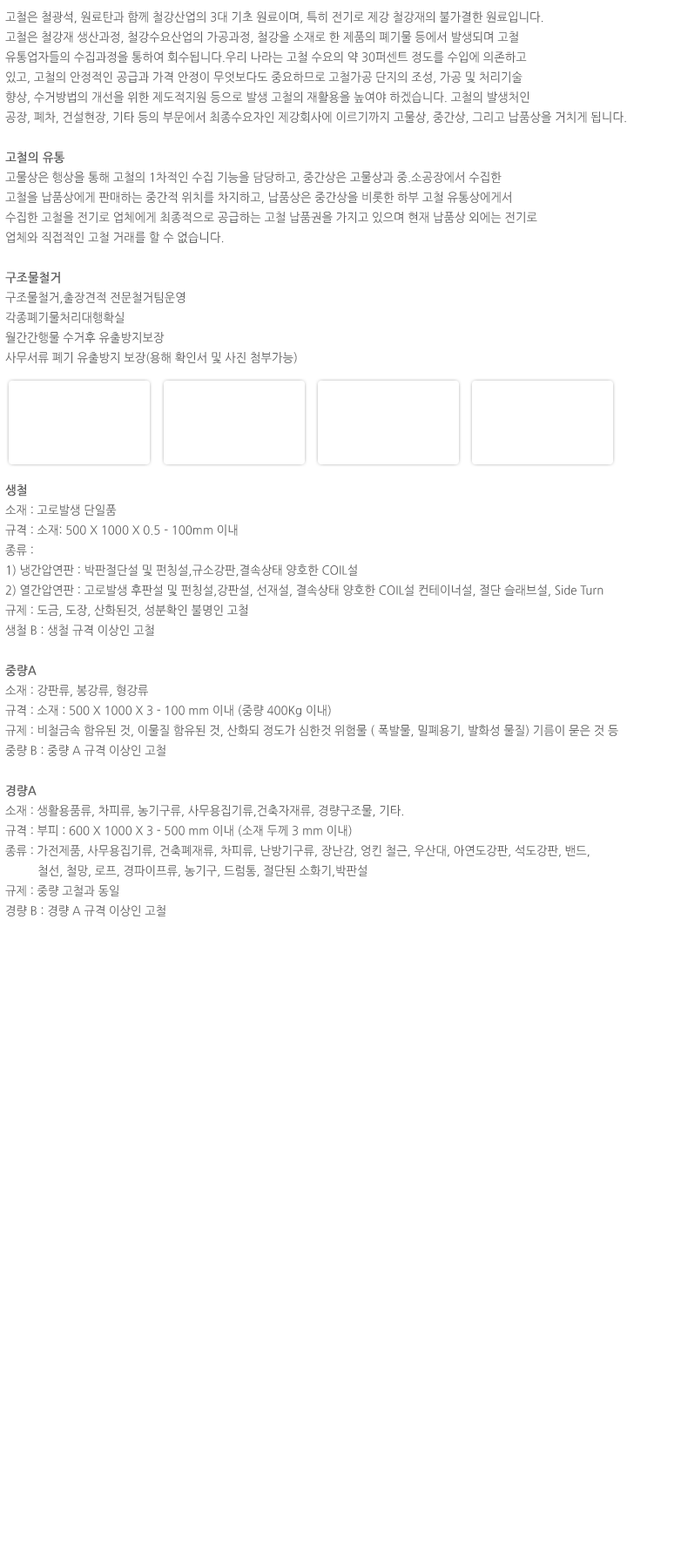
<style>
.page{position:relative;width:681px;height:1568px;background:#ffffff}
.page>*{position:absolute;margin:0}
.t1{font:12.2px/20px "NanumGothic";color:#5e5e5e;scale:0.95 1}
.t2{font:12.2px/20px "NanumGothic";color:#5e5e5e;font-weight:bold;scale:0.95 1}
</style>
<div class="page">
<p class="t1" style="left:5px;top:11px;width:621px;height:353px">고철은 철광석, 원료탄과 함께 철강산업의 3대 기초 원료이며, 특히 전기로 제강 철강재의 불가결한 원료입니다.<br>고철은 철강재 생산과정, 철강수요산업의 가공과정, 철강을 소재로 한 제품의 폐기물 등에서 발생되며 고철 <br>유통업자들의 수집과정을 통하여 회수됩니다.우리 나라는 고철 수요의 약 30퍼센트 정도를 수입에 의존하고 <br>있고, 고철의 안정적인 공급과 가격 안정이 무엇보다도 중요하므로 고철가공 단지의 조성, 가공 및 처리기술 <br>향상, 수거방법의 개선을 위한 제도적지원 등으로 발생 고철의 재활용을 높여야 하겠습니다. 고철의 발생처인 <br>공장, 폐차, 건설현장, 기타 등의 부문에서 최종수요자인 제강회사에 이르기까지 고물상, 중간상, 그리고 납품상을 거치게 됩니다.<br><br><span class="t2">고철의 유통<br></span>고물상은 행상을 통해 고철의 1차적인 수집 기능을 담당하고, 중간상은 고물상과 중.소공장에서 수집한 <br>고철을 납품상에게 판매하는 중간적 위치를 차지하고, 납품상은 중간상을 비롯한 하부 고철 유통상에게서 <br>수집한 고철을 전기로 업체에게 최종적으로 공급하는 고철 납품권을 가지고 있으며 현재 납품상 외에는 전기로<br>업체와 직접적인 고철 거래를 할 수 없습니다.<br><br><span class="t2">구조물철거<br></span>구조물철거,출장견적 전문철거팀운영 <br>각종폐기물처리대행확실 <br>월간간행물 수거후 유출방지보장<br>사무서류 폐기 유출방지 보장(용해 확인서 및 사진 첨부가능)</p>
<p class="t1" style="left:5px;top:484px;width:613px;height:432px"><span class="t2">생철</span> <br>소재 : 고로발생 단일품 <br>규격 : 소재: 500 X 1000 X 0.5 - 100mm 이내 <br>종류 : <br>1) 냉간압연판 : 박판절단설 및 펀칭설,규소강판,결속상태 양호한 COIL설 <br>2) 열간압연판 : 고로발생 후판설 및 펀칭설,강판설, 선재설, 결속상태 양호한 COIL설 컨테이너설, 절단 슬래브설, Side Turn<br>규제 : 도금, 도장, 산화된것, 성분확인 불명인 고철 <br>생철 B : 생철 규격 이상인 고철  <br> <br><span class="t2">중량A <br></span>소재 : 강판류, 봉강류, 형강류 <br>규격 : 소재 : 500 X 1000 X 3 - 100 mm 이내 (중량 400Kg 이내) <br>규제 : 비철금속 함유된 것, 이물질 함유된 것, 산화되 정도가 심한것 위험물 ( 폭발물, 밀폐용기, 발화성 물질) 기름이 묻은 것 등 <br>중량 B : 중량 A 규격 이상인 고철  <br> <br><span class="t2">경량A <br></span>소재 : 생활용품류, 차피류, 농기구류, 사무용집기류,건축자재류, 경량구조물, 기타. <br>규격 : 부피 : 600 X 1000 X 3 - 500 mm 이내 (소재 두께 3 mm 이내) <br>종류 : 가전제품, 사무용집기류, 건축폐재류, 차피류, 난방기구류, 장난감, 엉킨 철근, 우산대, 아연도강판, 석도강판, 밴드, <br>          철선, 철망, 로프, 경파이프류, 농기구, 드럼통, 절단된 소화기,박판설 <br>규제 : 중량 고철과 동일 <br>경량 B : 경량 A 규격 이상인 고철</p>
</div>
